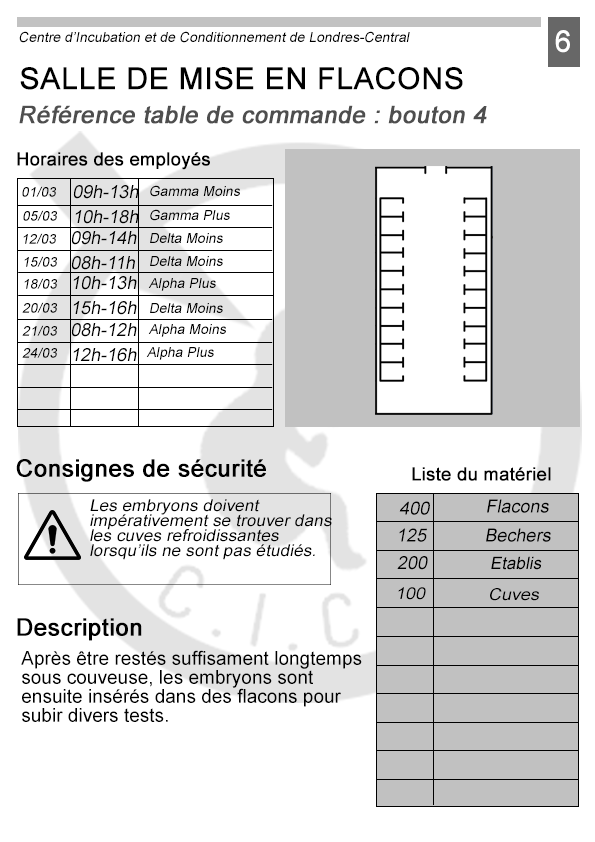
<style>
.page{position:relative;width:595px;height:842px;background:#ffffff}
.page>*{position:absolute;margin:0}
.t1{font:30px "ArialMT";letter-spacing:0.02em;color:#ffffff;font-weight:bold;scale:0.95 1}
.t2{font:14px "ArialMT";letter-spacing:0.001em;color:#000000;font-style:italic}
.t3{font:30px "ArialMT";letter-spacing:0.001em;color:#000000;font-weight:bold}
.t4{font:24px "ArialMT";letter-spacing:0.001em;color:#4e4e4e;font-weight:bold;font-style:italic}
.t5{font:18px "ArialMT";letter-spacing:0.001em;color:#000000;font-weight:bold}
.t6{font:18px "ArialMT";letter-spacing:0.001em;color:#000000;font-style:italic}
.t7{font:24px "ArialMT";letter-spacing:0.001em;color:#000000;font-weight:bold}
.t8{font:16.2px/15px "ArialMT";letter-spacing:0.001em;color:#000000;font-style:italic;scale:1.07 1}
.t9{font:17px "ArialMT";letter-spacing:0.001em;color:#000000;font-style:italic}
.t10{font:16.2px "ArialMT";letter-spacing:0.001em;color:#000000;font-style:italic;scale:1.11 1}
.t11{font:19px/19px "ArialMT";letter-spacing:0.001em;color:#000000}
</style>
<div class="page">
<p class="t1" style="left:555px;top:30px;width:15px;height:23px">6</p>
<p class="t2" style="left:19px;top:31px;width:391px;height:12px">Centre d’Incubation et de Conditionnement de Londres-Central</p>
<p class="t3" style="left:20px;top:67px;width:443px;height:23px">SALLE DE MISE EN FLACONS</p>
<p class="t4" style="left:19px;top:105px;width:468px;height:19px">Référence table de commande : bouton 4</p>
<p class="t5" style="left:17px;top:152px;width:193px;height:18px">Horaires des employés</p>
<p class="t6" style="left:73px;top:185px;width:66px;height:14px">09h-13h</p>
<p class="t2" style="left:150px;top:185px;width:90px;height:12px">Gamma Moins</p>
<p class="t2" style="left:22px;top:186px;width:34px;height:11px">01/03</p>
<p class="t2" style="left:150px;top:209px;width:80px;height:12px">Gamma Plus</p>
<p class="t2" style="left:23px;top:210px;width:34px;height:11px">05/03</p>
<p class="t6" style="left:75px;top:210px;width:64px;height:14px">10h-18h</p>
<p class="t2" style="left:23px;top:233px;width:33px;height:11px">12/03</p>
<p class="t6" style="left:71px;top:231px;width:66px;height:14px">09h-14h</p>
<p class="t2" style="left:150px;top:233px;width:73px;height:10px">Delta Moins</p>
<p class="t2" style="left:24px;top:256px;width:33px;height:11px">15/03</p>
<p class="t6" style="left:71px;top:256px;width:64px;height:14px">08h-11h</p>
<p class="t2" style="left:150px;top:256px;width:73px;height:10px">Delta Moins</p>
<p class="t2" style="left:24px;top:278px;width:33px;height:11px">18/03</p>
<p class="t6" style="left:73px;top:276px;width:64px;height:14px">10h-13h</p>
<p class="t2" style="left:148px;top:278px;width:68px;height:13px">Alpha Plus</p>
<p class="t2" style="left:22px;top:302px;width:35px;height:11px">20/03</p>
<p class="t6" style="left:73px;top:301px;width:64px;height:14px">15h-16h</p>
<p class="t2" style="left:150px;top:303px;width:73px;height:10px">Delta Moins</p>
<p class="t2" style="left:22px;top:325px;width:35px;height:11px">21/03</p>
<p class="t6" style="left:71px;top:323px;width:66px;height:14px">08h-12h</p>
<p class="t2" style="left:148px;top:324px;width:78px;height:13px">Alpha Moins</p>
<p class="t2" style="left:22px;top:347px;width:35px;height:11px">24/03</p>
<p class="t6" style="left:73px;top:348px;width:64px;height:14px">12h-16h</p>
<p class="t2" style="left:146px;top:347px;width:68px;height:13px">Alpha Plus</p>
<p class="t7" style="left:16px;top:459px;width:250px;height:23px">Consignes de sécurité</p>
<p class="t5" style="left:412px;top:467px;width:139px;height:14px">Liste du matériel</p>
<p class="t8" style="left:90px;top:499px;width:242px;height:61px">Les embryons doivent impérativement se trouver dans les cuves refroidissantes lorsqu’ils ne sont pas étudiés.</p>
<p class="t6" style="left:399px;top:501px;width:31px;height:14px">400</p>
<p class="t6" style="left:487px;top:499px;width:62px;height:14px">Flacons</p>
<p class="t6" style="left:399px;top:528px;width:28px;height:14px">125</p>
<p class="t6" style="left:486px;top:528px;width:65px;height:14px">Bechers</p>
<p class="t6" style="left:397px;top:556px;width:31px;height:14px">200</p>
<p class="t9" style="left:491px;top:556px;width:51px;height:14px">Etablis</p>
<p class="t10" style="left:398px;top:587px;width:28px;height:13px">100</p>
<p class="t10" style="left:490px;top:588px;width:49px;height:13px">Cuves</p>
<p class="t7" style="left:17px;top:618px;width:125px;height:23px">Description</p>
<p class="t11" style="left:21px;top:650px;width:341px;height:72px">Après être restés suffisament longtemps  sous couveuse, les embryons sont ensuite insérés dans des flacons pour subir divers tests.</p>
</div>
